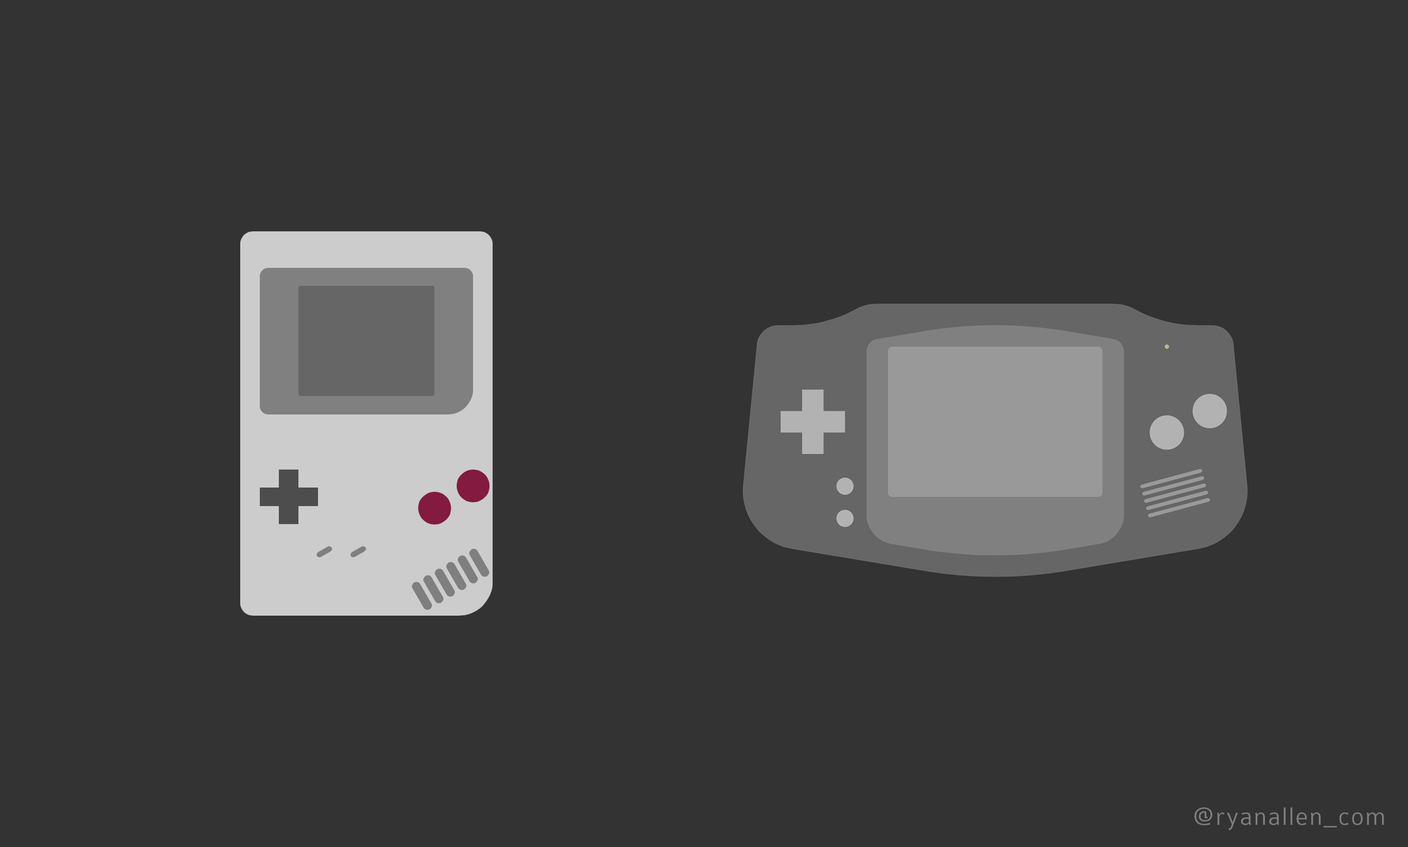
<style>
.page{position:relative;width:1408px;height:847px;background:#333333}
.page>*{position:absolute;margin:0}
.t1{font:26.4px "Colaborate-Light";letter-spacing:0.05em;color:#808080}
</style>
<div class="page">
<p class="t1" style="left:1194px;top:807px;width:190px;height:23px">@ryanallen_com</p>
</div>
